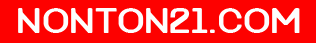
<style>
.page{position:relative;width:316px;height:43px;background:#fd0100}
.page>*{position:absolute;margin:0}
.t1{font:30px "Track";color:#fdfdfd;scale:1.15 1}
</style>
<div class="page">
<p class="t1" style="left:18px;top:8px;width:282px;height:25px">nonton21.com</p>
</div>
